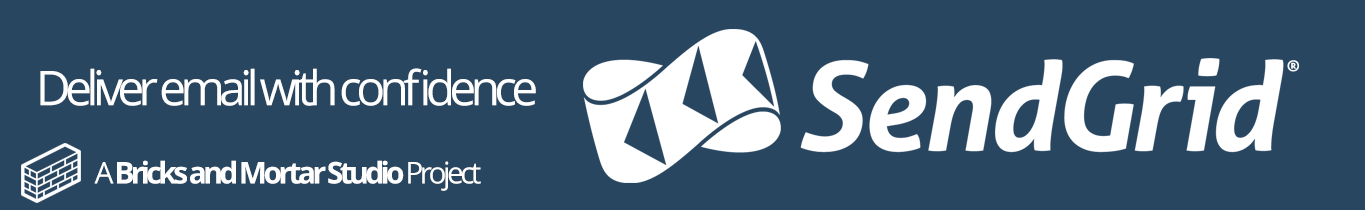
<style>
.page{position:relative;width:1365px;height:210px;background:#294661}
.page>*{position:absolute;margin:0}
.t1{font:48px "OpenSans";letter-spacing:-0.12em;color:#ffffff}
.t2{font:30px "OpenSans-Bold";letter-spacing:-0.12em;color:#ffffff}
.t3{font:30px "OpenSans";letter-spacing:-0.12em;color:#ffffff}
</style>
<div class="page">
<p class="t1" style="left:40px;top:68px;width:496px;height:38px">Deliver email with confidence</p>
<p class="t2" style="left:94px;top:160px;width:387px;height:31px"><span class="t3">A </span>Bricks and Mortar Studio <span class="t3">Project</span></p>
</div>
